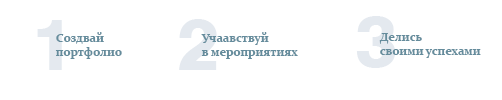
<style>
.page{position:relative;width:502px;height:100px;background:#ffffff}
.page>*{position:absolute;margin:0}
.t1{font:72px "Swiss721BT-Heavy";color:#e4e9ef}
.t2{font:12px "Constantia-Bold";color:#658c9c}
</style>
<div class="page">
<p class="t1" style="left:356px;top:16px;width:40px;height:52px">3</p>
<p class="t1" style="left:37px;top:20px;width:25px;height:50px">1</p>
<p class="t1" style="left:179px;top:19px;width:38px;height:51px">2</p>
<p class="t2" style="left:55px;top:32px;width:67px;height:27px">Создвай <br>портфолио</p>
<p class="t2" style="left:201px;top:32px;width:97px;height:27px">Учаавствуй <br>в мероприятиях</p>
<p class="t2" style="left:379px;top:33px;width:102px;height:25px">Делись<br>своими успехами</p>
</div>
